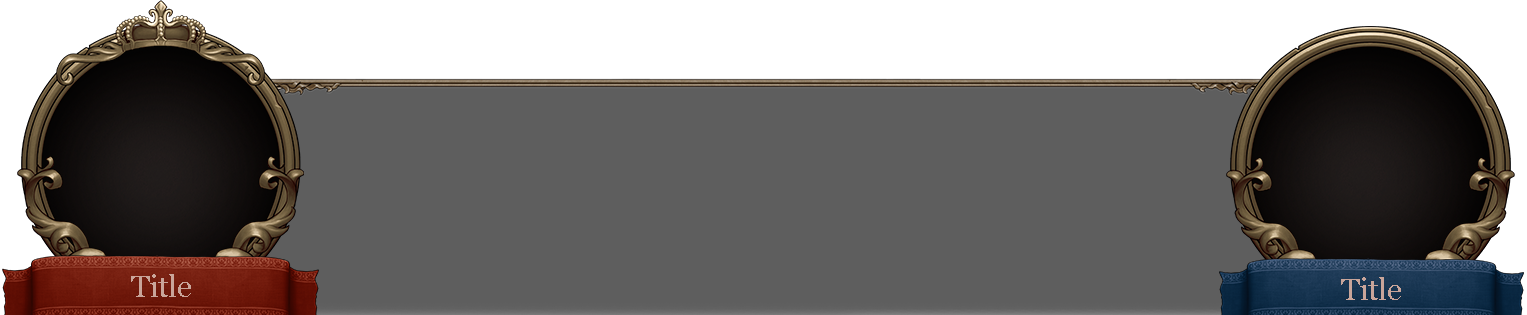
<style>
.page{position:relative;width:1527px;height:315px;background:#5e5e5e}
.page>*{position:absolute;margin:0}
.t1{font:29.6px "Georgia";color:#c9a59a}
</style>
<div class="page">
<p class="t1" style="left:131px;top:274px;width:60px;height:23px">Title</p>
<p class="t1" style="left:1341px;top:277px;width:60px;height:23px">Title</p>
</div>
